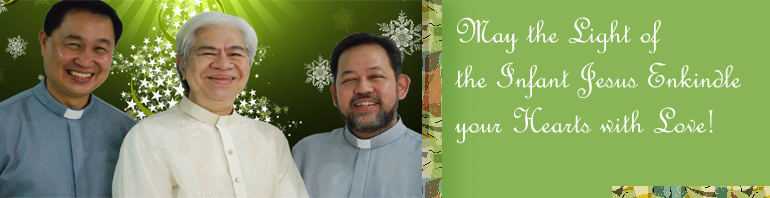
<style>
.page{position:relative;width:770px;height:198px;background:#89b556}
.page>*{position:absolute;margin:0}
.t1{font:37.5px "FrenchScriptMT";color:#ffffff}
</style>
<div class="page">
<p class="t1" style="left:455px;top:17px;width:287px;height:127px">May the Light of<br>the Infant Jesus Enkindle <br>your Hearts with Love!</p>
</div>
